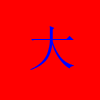
<style>
.page{position:relative;width:100px;height:100px;background:#ff0000}
.page>*{position:absolute;margin:0}
.t1{font:48px "SimSun";color:#0000ff}
</style>
<div class="page">
<p class="t1" style="left:30px;top:26px;width:44px;height:44px">大</p>
</div>
